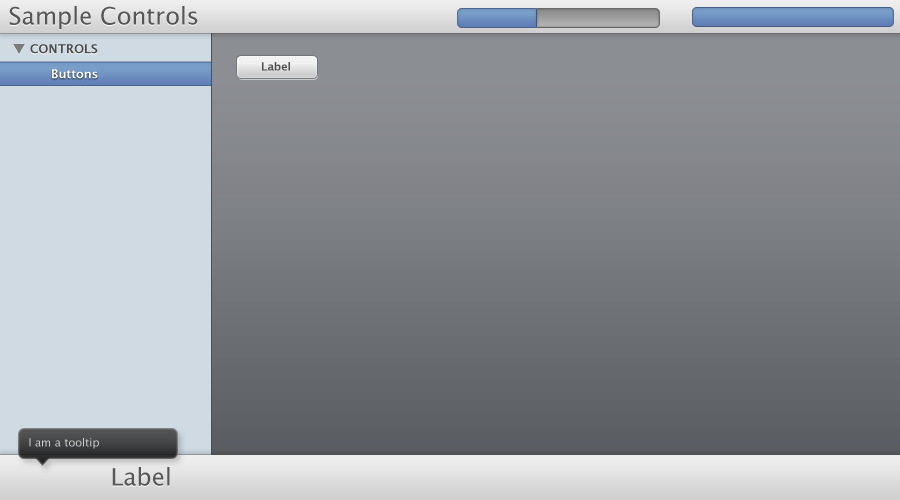
<style>
.page{position:relative;width:900px;height:500px}
.page>*{position:absolute;margin:0}
.t1{font:24px "LucidaGrande";color:#565656}
.t2{font:12px "LucidaGrande-Bold";color:#474646}
.t3{font:11px "LucidaGrande-Bold";color:#4a4a4a}
.t4{font:12px "LucidaGrande-Bold";color:#ffffff}
.t5{font:11px "LucidaGrande";color:#d2d2d2}
</style>
<div class="page">
<p class="t1" style="left:9px;top:6px;width:189px;height:24px">Sample Controls</p>
<p class="t2" style="left:30px;top:44px;width:68px;height:10px">CONTROLS</p>
<p class="t3" style="left:262px;top:62px;width:28px;height:9px">Label</p>
<p class="t4" style="left:52px;top:69px;width:46px;height:10px">Buttons</p>
<p class="t5" style="left:29px;top:438px;width:70px;height:11px">I am a tooltip</p>
<p class="t1" style="left:112px;top:467px;width:58px;height:19px">Label</p>
</div>
